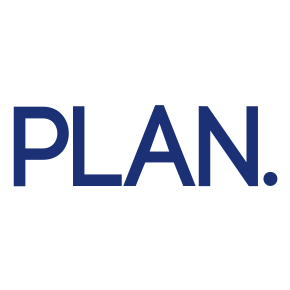
<style>
.page{position:relative;width:290px;height:290px;background:#ffffff}
.page>*{position:absolute;margin:0}
.t1{font:45px "Code-Pro-Demo";color:#1b3075}
</style>
<div class="page">
<p class="t1" style="left:13px;top:105px;width:265px;height:82px">plan.</p>
</div>
